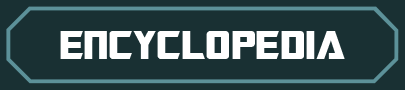
<style>
.page{position:relative;width:405px;height:90px;background:#193033}
.page>*{position:absolute;margin:0}
.t1{font:45px "TransformersMovie";letter-spacing:0.02em;color:#ffffff}
.t2{font:45px "TransformersMovie";letter-spacing:0.04em;color:#ffffff}
</style>
<div class="page">
<p class="t1" style="left:60px;top:31px;width:285px;height:28px">encycl<span class="t2">o</span>pe<span class="t2">d</span>ia</p>
</div>
